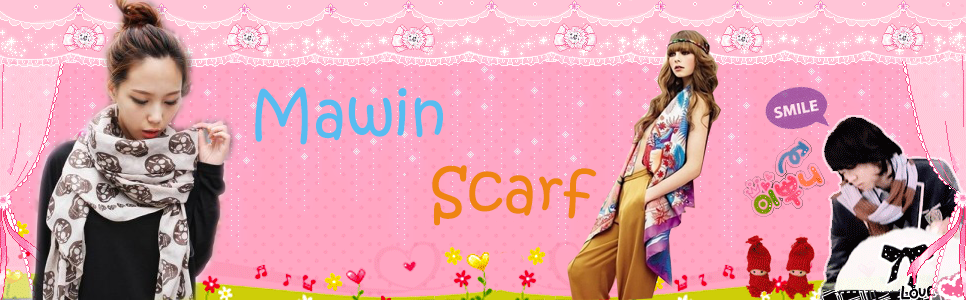
<style>
.page{position:relative;width:966px;height:300px}
.page>*{position:absolute;margin:0}
.t1{font:60.1px "KristenITC-Regular";color:#58bcf0}
.t2{font:59.7px "KristenITC-Regular";color:#ef8412}
</style>
<div class="page">
<p class="t1" style="left:255px;top:87px;width:188px;height:58px">Mawin</p>
<p class="t2" style="left:432px;top:165px;width:165px;height:61px">Scarf</p>
</div>
